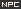
<style>
.page{position:relative;width:21px;height:9px;background:#333333}
.page>*{position:absolute;margin:0}
.t1{font:8px "5x5-Pixel";color:#f0e6df}
</style>
<div class="page">
<p class="t1" style="left:2px;top:2px;width:17px;height:5px">npc</p>
</div>
